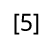
<style>
.page{position:relative;width:53px;height:41px;background:#ffffff}
.page>*{position:absolute;margin:0}
.t1{font:23.7px "DroidSans";color:#000000}
</style>
<div class="page">
<p class="t1" style="left:14px;top:13px;width:25px;height:22px">[5]</p>
</div>
